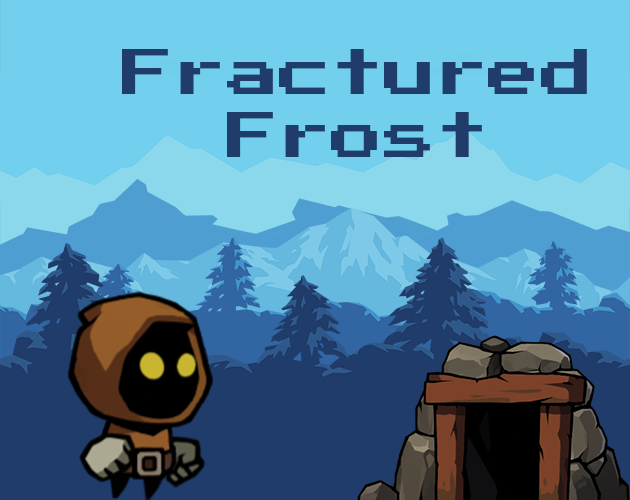
<style>
.page{position:relative;width:630px;height:500px;background:#72cfed}
.page>*{position:absolute;margin:0}
.t1{font:52.4px "PressStart2P-Regular";color:#203c6a}
</style>
<div class="page">
<p class="t1" style="left:122px;top:49px;width:465px;height:108px;text-align:center">Fractured Frost</p>
</div>
